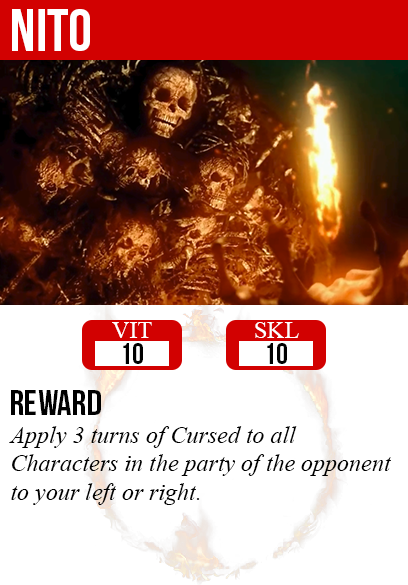
<style>
.page{position:relative;width:408px;height:585px;background:#ffffff}
.page>*{position:absolute;margin:0}
.t1{font:60px "BebasNeue";color:#ffffff}
.t2{font:24px "TimesNewRomanPSMT";color:#ffffff}
.t3{font:30px "BebasNeue";color:#000000}
.t4{font:36px "BebasNeue";color:#000000}
.t5{font:24px "TimesNewRomanPS-ItalicMT";color:#000000}
</style>
<div class="page">
<p class="t1" style="left:12px;top:9px;width:78px;height:42px">nito</p>
<p class="t2" style="left:112px;top:322px;width:40px;height:16px">VIT</p>
<p class="t2" style="left:255px;top:322px;width:44px;height:16px">SKL</p>
<p class="t3" style="left:123px;top:343px;width:20px;height:21px">10</p>
<p class="t3" style="left:267px;top:343px;width:20px;height:21px">10</p>
<p class="t4" style="left:11px;top:390px;width:90px;height:25px">reward</p>
<p class="t5" style="left:9px;top:426px;width:382px;height:79px">Apply 3 turns of Cursed to all<br>Characters in the party of the opponent<br>to your left or right.</p>
</div>
